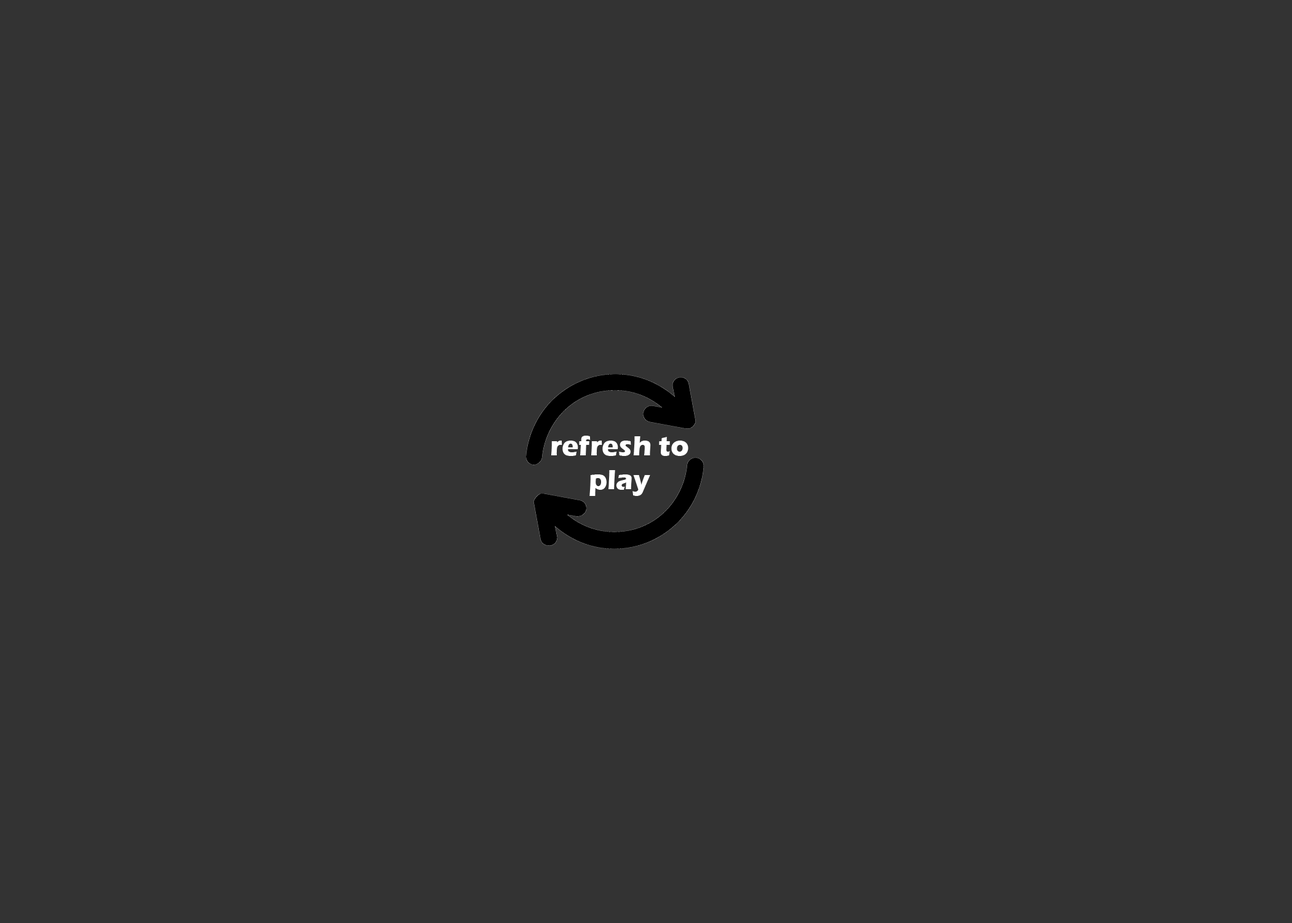
<style>
.page{position:relative;width:1292px;height:923px;background:#333333}
.page>*{position:absolute;margin:0}
.t1{font:28.2px "ErasITC-Bold";color:#ffffff}
</style>
<div class="page">
<p class="t1" style="left:551px;top:436px;width:137px;height:60px;text-align:center">refresh to<br>play</p>
</div>
